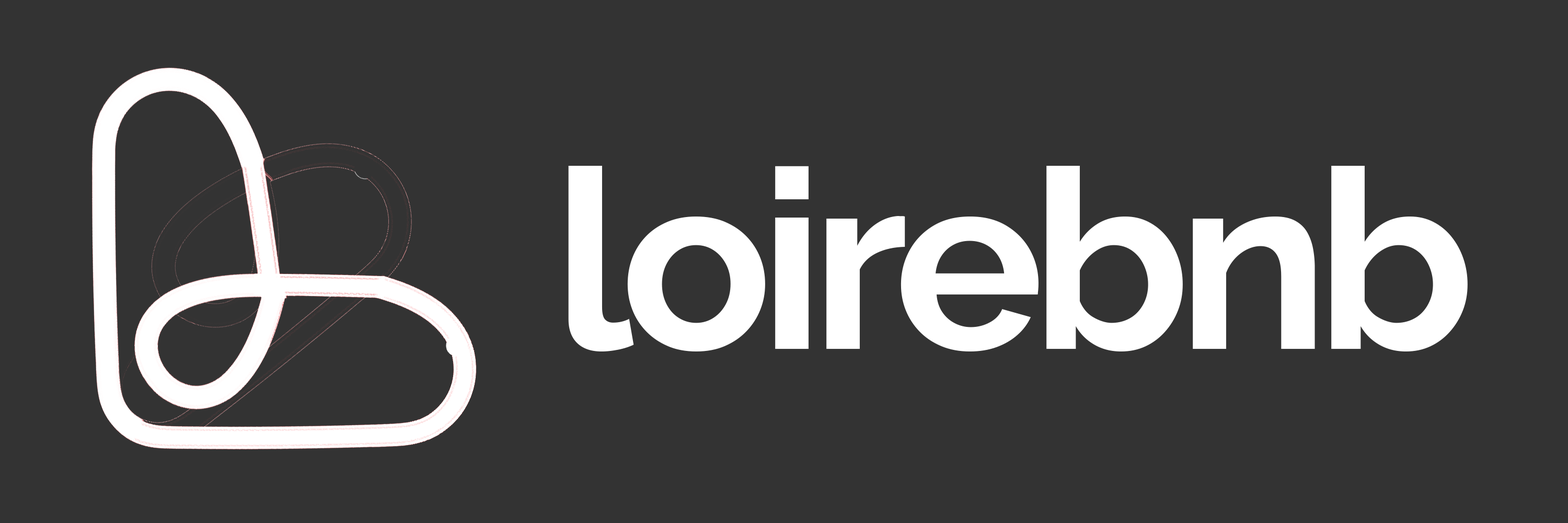
<style>
.page{position:relative;width:1568px;height:523px;background:#333333}
.page>*{position:absolute;margin:0}
.t1{font:250.4px "RalewayRoman-Bold";letter-spacing:-0.05em;color:#ffffff}
</style>
<div class="page">
<p class="t1" style="left:568px;top:166px;width:900px;height:185px">loirebnb</p>
</div>
